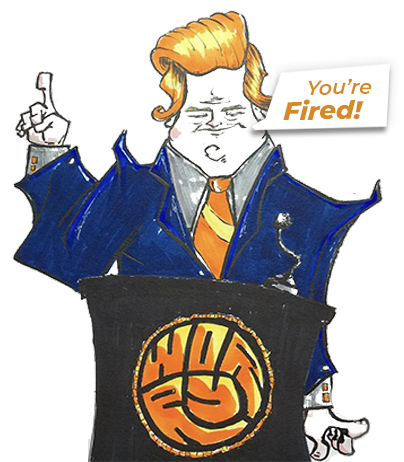
<style>
.page{position:relative;width:404px;height:462px;background:#ffffff}
.page>*{position:absolute;margin:0}
.t1{font:20.2px "Montserrat-SemiBoldItalic";color:#d58a26}
.t2{font:25.6px "Montserrat-ExtraBoldItalic";color:#d58a26}
</style>
<div class="page">
<p class="t1" style="left:308px;top:78px;width:64px;height:17px;rotate:-1deg">You’re</p>
<p class="t2" style="left:283px;top:99px;width:81px;height:21px;rotate:-1deg">Fired!</p>
</div>
